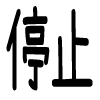
<style>
.page{position:relative;width:100px;height:100px;background:#ffffff}
.page>*{position:absolute;margin:0}
.t1{font:96px "SetoFont-SC";letter-spacing:-0.075em;color:#000000;scale:0.5 1}
</style>
<div class="page">
<p class="t1" style="left:6px;top:6px;width:87px;height:85px">停止</p>
</div>
